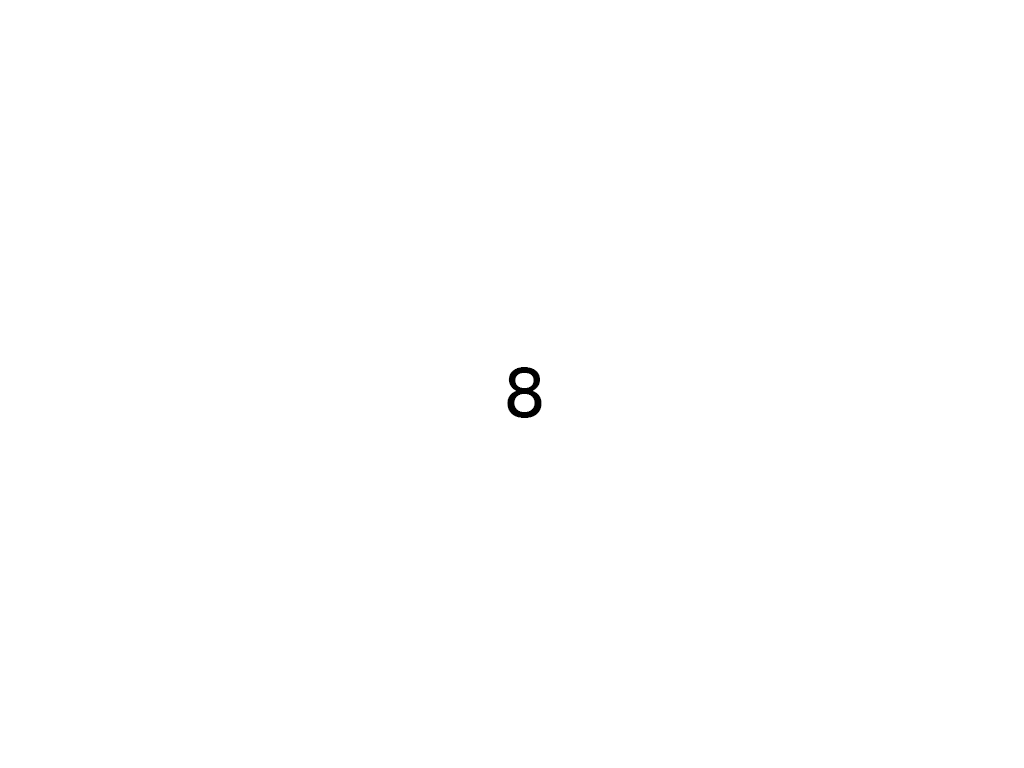
<style>
.page{position:relative;width:1024px;height:768px;background:#ffffff}
.page>*{position:absolute;margin:0}
.t1{font:72px "Rockwell";color:#000000}
</style>
<div class="page">
<p class="t1" style="left:507px;top:367px;width:35px;height:51px">8</p>
</div>
